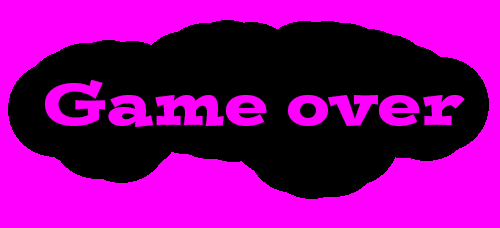
<style>
.page{position:relative;width:500px;height:228px;background:#ff00ff}
.page>*{position:absolute;margin:0}
.t1{font:60px "PostinoStd";color:#ff00ff}
</style>
<div class="page">
<p class="t1" style="left:45px;top:79px;width:420px;height:48px">Game over</p>
</div>
